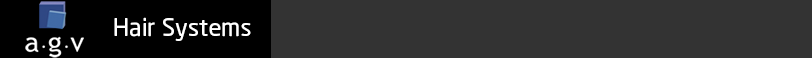
<style>
.page{position:relative;width:812px;height:67px;background:#333333}
.page>*{position:absolute;margin:0}
.t1{font:24px "NeoSans";color:#ffffff}
</style>
<div class="page">
<p class="t1" style="left:114px;top:17px;width:137px;height:24px">Hair Systems</p>
</div>
